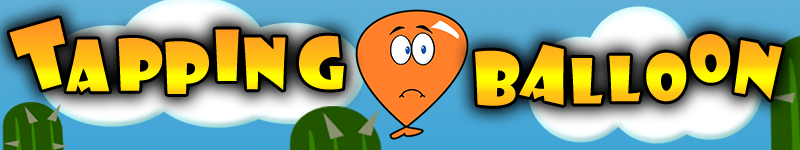
<style>
.page{position:relative;width:800px;height:150px}
.page>*{position:absolute;margin:0}
.t1{font:85.3px "ShowcardGothic-Reg"}
.t2{font:68.9px "ShowcardGothic-Reg"}
.t3{font:69px "ShowcardGothic-Reg"}
.t4{font:60.6px "ShowcardGothic-Reg"}
.t5{font:70.1px "ShowcardGothic-Reg"}
.t6{font:69.9px "ShowcardGothic-Reg"}
.t7{font:72.7px "ShowcardGothic-Reg"}
</style>
<div class="page">
<p class="t1" style="left:9px;top:18px;width:57px;height:72px;rotate:-16deg">T</p>
<p class="t2" style="left:215px;top:29px;width:24px;height:52px">i</p>
<p class="t3" style="left:66px;top:39px;width:44px;height:54px">a</p>
<p class="t3" style="left:118px;top:38px;width:45px;height:53px">p</p>
<p class="t3" style="left:165px;top:41px;width:44px;height:53px">p</p>
<p class="t3" style="left:244px;top:37px;width:42px;height:53px">n</p>
<p class="t3" style="left:299px;top:35px;width:45px;height:55px">g</p>
<p class="t4" style="left:690px;top:34px;width:41px;height:49px;rotate:-6deg">o</p>
<p class="t5" style="left:734px;top:40px;width:49px;height:60px;rotate:10deg">n</p>
<p class="t6" style="left:475px;top:50px;width:45px;height:56px">b</p>
<p class="t7" style="left:519px;top:44px;width:45px;height:61px;rotate:13deg">a</p>
<p class="t4" style="left:646px;top:52px;width:41px;height:50px">o</p>
<p class="t4" style="left:571px;top:58px;width:32px;height:46px">l</p>
<p class="t4" style="left:609px;top:55px;width:32px;height:47px">l</p>
</div>
